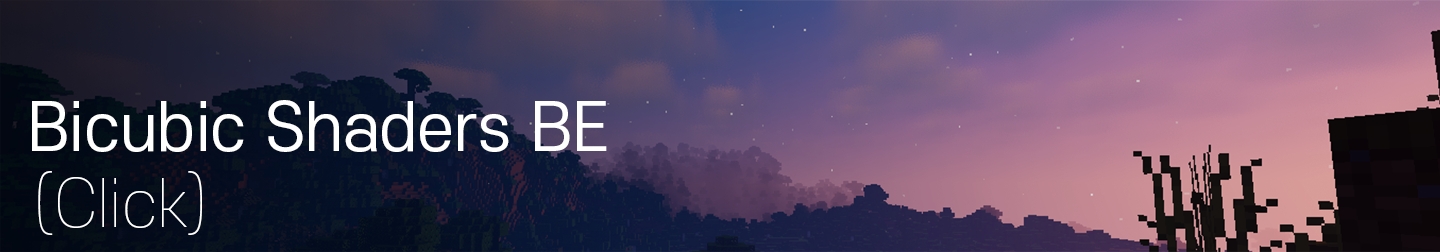
<style>
.page{position:relative;width:1440px;height:252px}
.page>*{position:absolute;margin:0}
.t1{font:64px "S-CoreDream-4Regular";color:#ffffff}
.t2{font:64px "S-CoreDream-1Thin";color:#ffffff}
</style>
<div class="page">
<p class="t1" style="left:32px;top:100px;width:575px;height:52px">Bicubic Shaders BE</p>
<p class="t2" style="left:38px;top:171px;width:164px;height:64px">(Click)</p>
</div>
